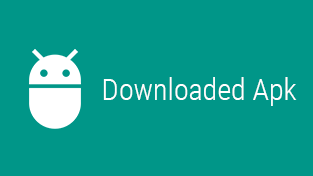
<style>
.page{position:relative;width:313px;height:176px;background:#009688}
.page>*{position:absolute;margin:0}
.t1{font:30px "RobotoCondensed-Light";color:#ffffff}
</style>
<div class="page">
<p class="t1" style="left:103px;top:77px;width:194px;height:29px">Downloaded Apk</p>
</div>
